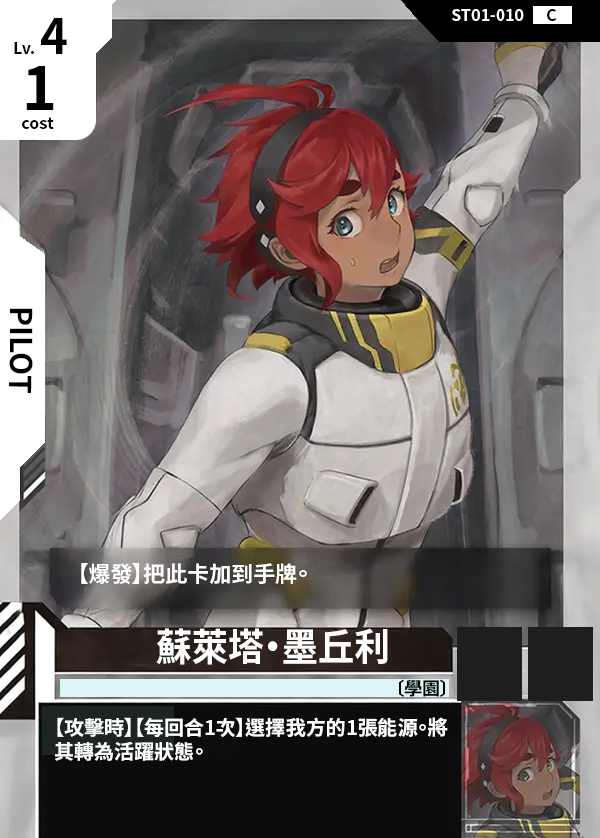
<style>
.page{position:relative;width:600px;height:838px}
.page>*{position:absolute;margin:0}
.t1{font:16px "NotoSansCJKtc-Bold";color:#ffffff}
.t2{font:16px "NotoSansCJKtc-Bold";color:#000000}
.t3{font:48px "NotoSansCJKtc-Bold";color:#000000}
.t4{font:60px "NotoSansCJKtc-Bold";color:#000000}
.t5{font:30px "NotoSansCJKtc-Bold";color:#000000}
.t6{font:22px "NotoSansCJKtc-Bold";color:#ffffff}
.t7{font:38.4px "NotoSansCJKtc-Bold";color:#ffffff;scale:0.94 1}
.t8{font:18px "NotoSansCJKtc-Bold";color:#000000}
.t9{font:20px "NotoSansCJKtc-Bold";color:#ffffff}
</style>
<div class="page">
<p class="t1" style="left:452px;top:9px;width:72px;height:12px">ST01-010</p>
<p class="t2" style="left:547px;top:9px;width:10px;height:12px">C</p>
<p class="t3" style="left:41px;top:18px;width:26px;height:36px">4</p>
<p class="t2" style="left:14px;top:42px;width:20px;height:12px">Lv.</p>
<p class="t4" style="left:26px;top:66px;width:28px;height:44px">1</p>
<p class="t2" style="left:22px;top:117px;width:32px;height:12px">cost</p>
<p class="t5" style="left:9px;top:308px;width:24px;height:85px;rotate:90deg">PILOT</p>
<p class="t6" style="left:81px;top:563px;width:226px;height:22px">【爆發】把此卡加到手牌。</p>
<p class="t7" style="left:156px;top:628px;width:232px;height:37px">蘇萊塔・墨丘利</p>
<p class="t8" style="left:399px;top:679px;width:46px;height:18px">〔學園〕</p>
<p class="t9" style="left:55px;top:717px;width:393px;height:44px">【攻擊時】【每回合1次】選擇我方的1張能源。將<br>其轉為活躍狀態。</p>
</div>
